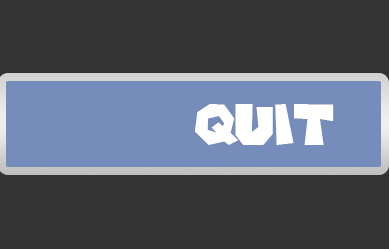
<style>
.page{position:relative;width:389px;height:249px;background:#333333}
.page>*{position:absolute;margin:0}
.t1{font:54.8px "SuperMarioGalaxy";color:#ffffff}
</style>
<div class="page">
<p class="t1" style="left:194px;top:104px;width:140px;height:41px">QUIT</p>
</div>
